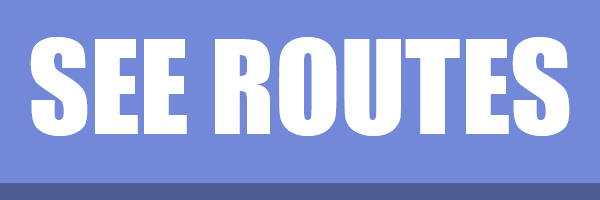
<style>
.page{position:relative;width:600px;height:200px;background:#7289da}
.page>*{position:absolute;margin:0}
.t1{font:119.6px "Impact";color:#ffffff}
</style>
<div class="page">
<p class="t1" style="left:30px;top:37px;width:540px;height:99px">SEE ROUTES</p>
</div>
